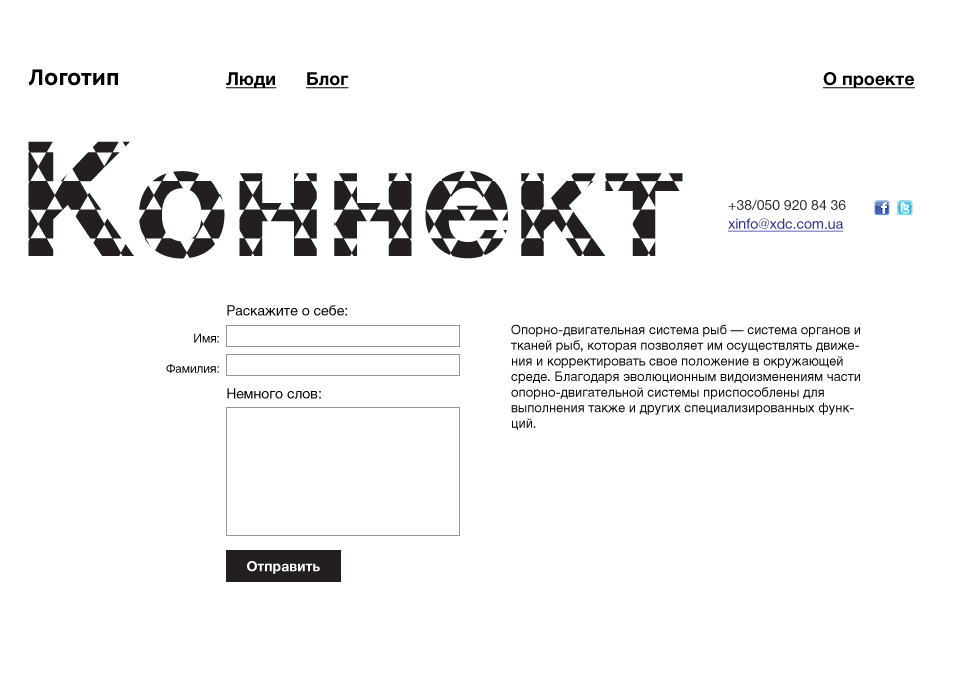
<style>
.page{position:relative;width:960px;height:692px;background:#ffffff}
.page>*{position:absolute;margin:0}
.t1{font:24px "OksanaSansNarrow-Bold";color:#000000}
.t2{font:18px "HelveticaNeueLTCYR-Bold";color:#000000;text-decoration:underline}
.t3{font:14px/18.8px "HelveticaNeueLTCYR-Roman";color:#2c2c2c}
.t4{font:14px/18.8px "HelveticaNeueLTCYR-Roman";color:#2e3192;text-decoration:underline}
.t5{font:14px "HelveticaNeueLTCYR-Roman";color:#000000}
.t6{font:13px "HelveticaNeueLTCYR-Roman";color:#000000}
.t7{font:12px "HelveticaNeueLTCYR-Roman";color:#000000}
.t8{font:14px "HelveticaNeueLTCYR-Bold";color:#ffffff}
</style>
<div class="page">
<p class="t1" style="left:28px;top:69px;width:90px;height:17px">Логотип</p>
<p class="t2" style="left:226px;top:72px;width:51px;height:17px">Люди</p>
<p class="t2" style="left:306px;top:72px;width:43px;height:17px">Блог</p>
<p class="t2" style="left:823px;top:72px;width:92px;height:17px">О проекте</p>
<p class="t3" style="left:728px;top:199px;width:118px;height:33px">+38/050 920 84 36<br><span class="t4">xinfo@xdc.com.ua</span></p>
<p class="t5" style="left:227px;top:305px;width:120px;height:11px">Раскажите о себе:</p>
<p class="t6" style="left:511px;top:324px;width:349px;height:106px">Опорно-двигательная система рыб — система органов и тканей рыб, которая позволяет им осуществлять движения и корректировать свое положение в окружающей среде. Благодаря эволюционным видоизменениям части опорно-двигательной системы приспособлены для выполнения также и других специализированных функций.</p>
<p class="t7" style="left:194px;top:333px;width:25px;height:10px">Имя:</p>
<p class="t7" style="left:166px;top:364px;width:53px;height:9px">Фамилия:</p>
<p class="t5" style="left:227px;top:388px;width:94px;height:11px">Немного слов:</p>
<p class="t8" style="left:247px;top:561px;width:73px;height:13px">Отправить</p>
</div>
